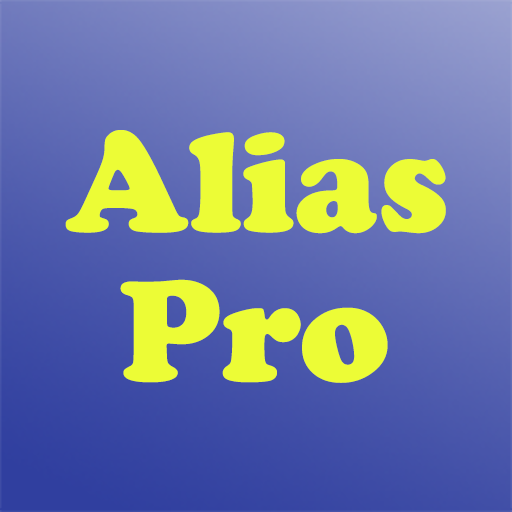
<style>
.page{position:relative;width:512px;height:512px}
.page>*{position:absolute;margin:0}
.t1{font:147.9px "CooperBlack";color:#ecfc36}
.t2{font:150px "CooperBlack";color:#ecfc36}
</style>
<div class="page">
<p class="t1" style="left:65px;top:130px;width:381px;height:104px">Alias</p>
<p class="t2" style="left:120px;top:279px;width:268px;height:104px">Pro</p>
</div>
